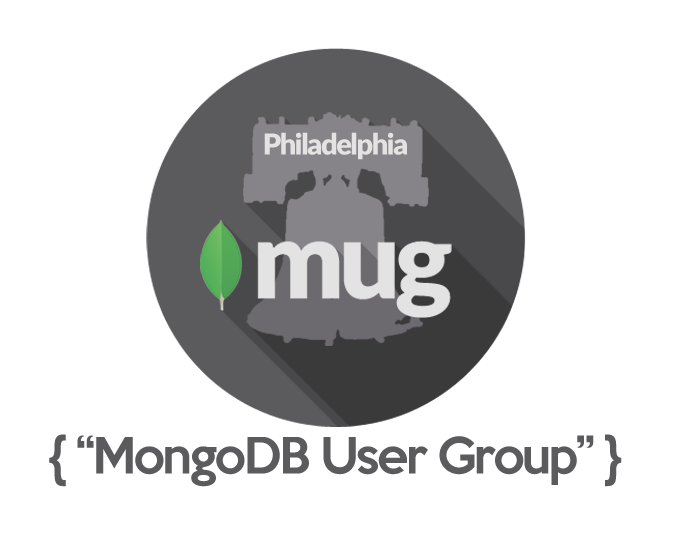
<style>
.page{position:relative;width:675px;height:540px;background:#ffffff}
.page>*{position:absolute;margin:0}
.t1{font:29.1px "Lato-Black";letter-spacing:-0.05em;color:#e3e3e3}
.t2{font:45.7px "KeepCalm-Medium";letter-spacing:-0.05em;color:#5b5a5c}
</style>
<div class="page">
<p class="t1" style="left:264px;top:132px;width:143px;height:28px">Philadelphia</p>
<p class="t2" style="left:49px;top:434px;width:573px;height:53px">{ “MongoDB User Group” }</p>
</div>
